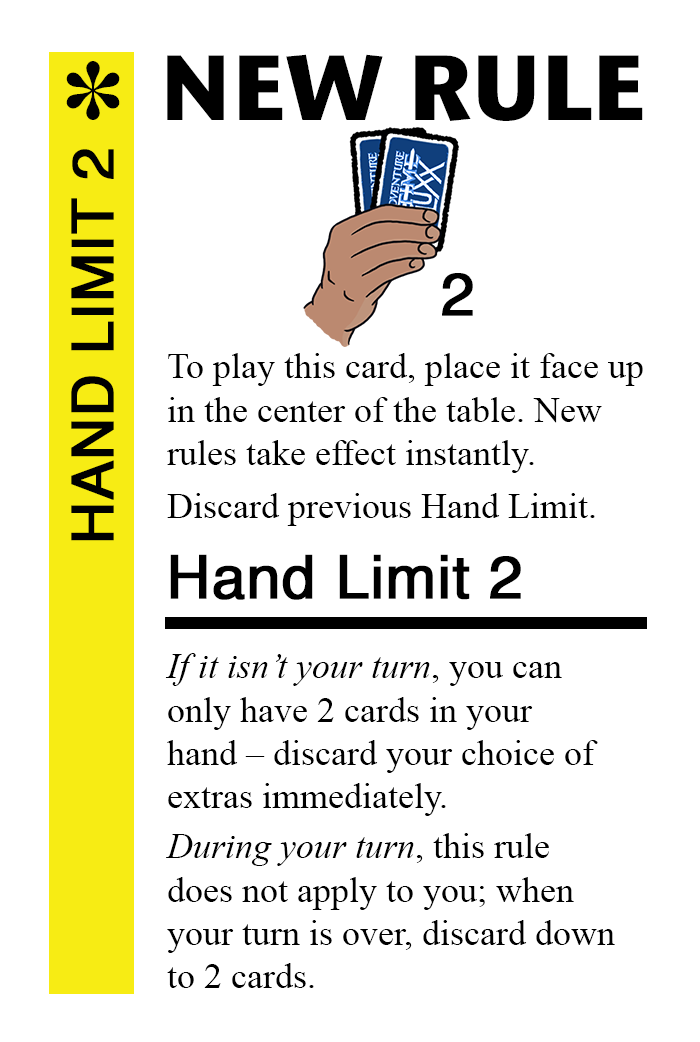
<style>
.page{position:relative;width:700px;height:1042px;background:#ffffff}
.page>*{position:absolute;margin:0}
.t1{font:92px "StoneSansITC-Bold";color:#000000}
.t2{font:82px "MS-Gothic";color:#000000}
.t3{font:58px "Helvetica";color:#000000;font-weight:bold}
.t4{font:60px "Helvetica";color:#000000;font-weight:bold}
.t5{font:36px "TimesNewRomanPSMT";color:#000000}
.t6{font:36px "TimesNewRomanPS-ItalicMT";color:#000000}
</style>
<div class="page">
<p class="t1" style="left:167px;top:54px;width:476px;height:67px">NEW RULE</p>
<p class="t2" style="left:66px;top:61px;width:54px;height:59px">✽</p>
<p class="t3" style="left:71px;top:149px;width:43px;height:392px;rotate:-90deg">HAND LIMIT 2</p>
<p class="t4" style="left:442px;top:273px;width:31px;height:43px">2</p>
<p class="t5" style="left:167px;top:353px;width:476px;height:120px">To play this card, place it face up<br>in the center of the table. New <br>rules take effect instantly.</p>
<p class="t5" style="left:167px;top:493px;width:428px;height:33px">Discard previous Hand Limit.</p>
<p class="t4" style="left:170px;top:554px;width:351px;height:46px">Hand Limit 2</p>
<p class="t5" style="left:165px;top:653px;width:433px;height:163px"><span class="t6">If it isn’t your turn</span>, you can <br>only have 2 cards in your <br>hand ­­– discard your choice of <br>extras immediately.</p>
<p class="t5" style="left:166px;top:833px;width:449px;height:155px"><span class="t6">During your turn</span>, this rule<br>does not apply to you; when<br>your turn is over, discard down<br>to 2 cards.</p>
</div>
